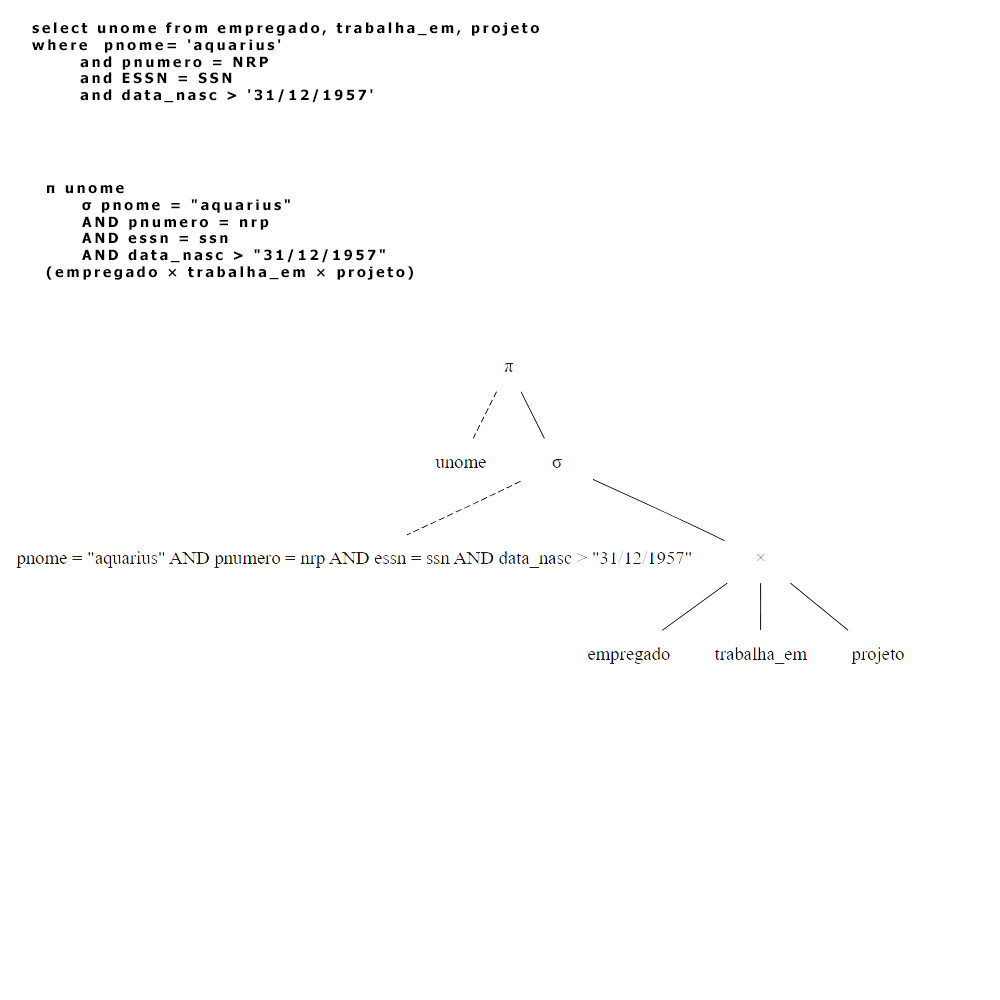
<style>
.page{position:relative;width:1000px;height:1000px;background:#ffffff}
.page>*{position:absolute;margin:0}
.t1{font:14px "Tahoma-Bold";letter-spacing:0.2em;color:#000000}
</style>
<div class="page">
<p class="t1" style="left:32px;top:22px;width:507px;height:81px">select unome from empregado, trabalha_em, projeto <br>where  pnome= 'aquarius' <br>       and pnumero = NRP <br>       and ESSN = SSN <br>       and data_nasc &gt; '31/12/1957'</p>
<p class="t1" style="left:46px;top:185px;width:367px;height:95px">π unome<br> σ pnome = "aquarius" <br> AND pnumero = nrp <br> AND essn = ssn <br> AND data_nasc &gt; "31/12/1957" <br>(empregado × trabalha_em × projeto)</p>
</div>
